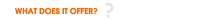
<style>
.page{position:relative;width:200px;height:20px;background:#ffffff}
.page>*{position:absolute;margin:0}
.t1{font:19px "Atlanta-Demi";color:#e6e6e6}
.t2{font:8px "Atlanta-Demi";color:#ff6600}
</style>
<div class="page">
<p class="t1" style="left:105px;top:2px;width:9px;height:16px">?</p>
<p class="t2" style="left:15px;top:7px;width:83px;height:8px">WHAT DOES IT OFFER?</p>
</div>
